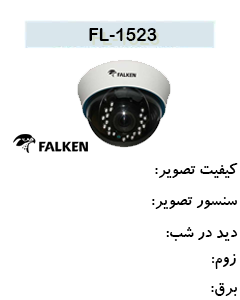
<style>
.page{position:relative;width:240px;height:300px;background:#ffffff}
.page>*{position:absolute;margin:0}
.t1{font:17.6px "ArialRoundedMTBold";color:#000000}
.t2{font:17.6px "BKoodakBold";color:#000000}
</style>
<div class="page">
<p class="t1" style="left:89px;top:28px;width:68px;height:13px">1523-FL</p>
<p class="t2" style="left:155px;top:163px;width:83px;height:15px">کیفیت تصویر:</p>
<p class="t2" style="left:152px;top:197px;width:85px;height:12px">سنسور تصویر:</p>
<p class="t2" style="left:166px;top:227px;width:72px;height:14px">دید در شب:</p>
<p class="t2" style="left:212px;top:254px;width:24px;height:15px">زوم:</p>
<p class="t2" style="left:211px;top:283px;width:26px;height:13px">برق:</p>
</div>
